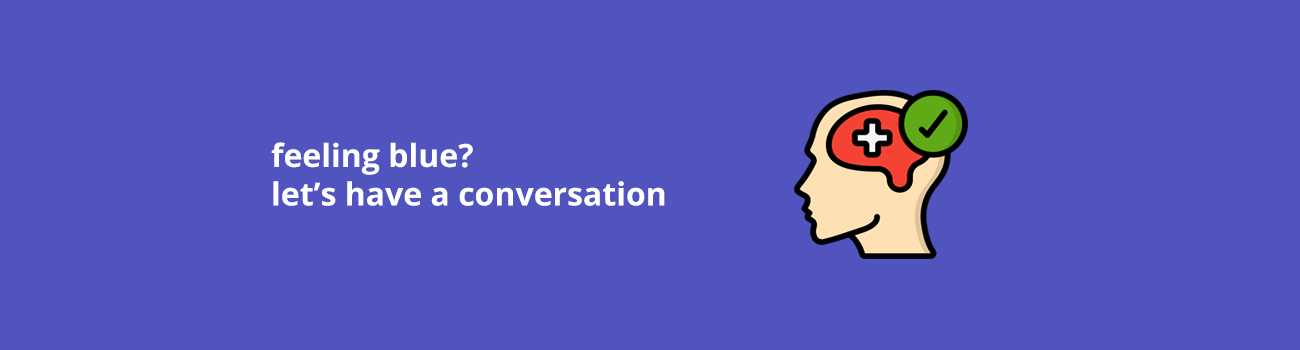
<style>
.page{position:relative;width:1300px;height:350px;background:#5154bf}
.page>*{position:absolute;margin:0}
.t1{font:32px "OpenSans-Bold";color:#ffffff}
.t2{font:32px "OpenSans-Bold";color:#5154bf}
</style>
<div class="page">
<p class="t1" style="left:271px;top:142px;width:394px;height:64px;text-align:right">feeling blue?<span class="t2">m<br></span>let’s have a conversation</p>
</div>
